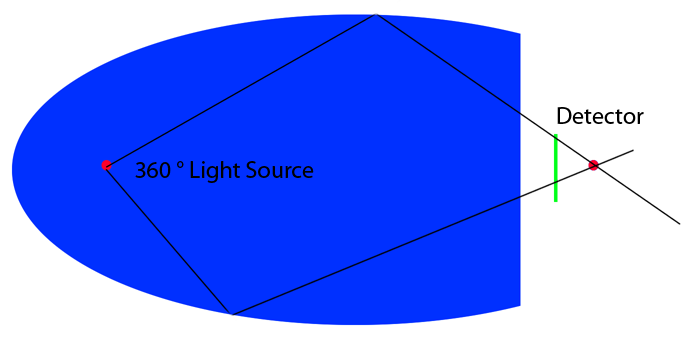
<style>
.page{position:relative;width:694px;height:344px;background:#0030ff}
.page>*{position:absolute;margin:0}
.t1{font:24px "MyriadPro-Regular";color:#000000}
</style>
<div class="page">
<p class="t1" style="left:557px;top:107px;width:87px;height:17px">Detector</p>
<p class="t1" style="left:135px;top:161px;width:179px;height:22px">360 ° Light Source</p>
</div>
